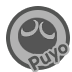
<style>
.page{position:relative;width:72px;height:72px;background:#ffffff}
.page>*{position:absolute;margin:0}
.t1{font:18.8px "MikadoMedium";color:#535453}
</style>
<div class="page">
<p class="t1" style="left:28px;top:44px;width:40px;height:27px;rotate:-30deg">Puyo</p>
</div>
